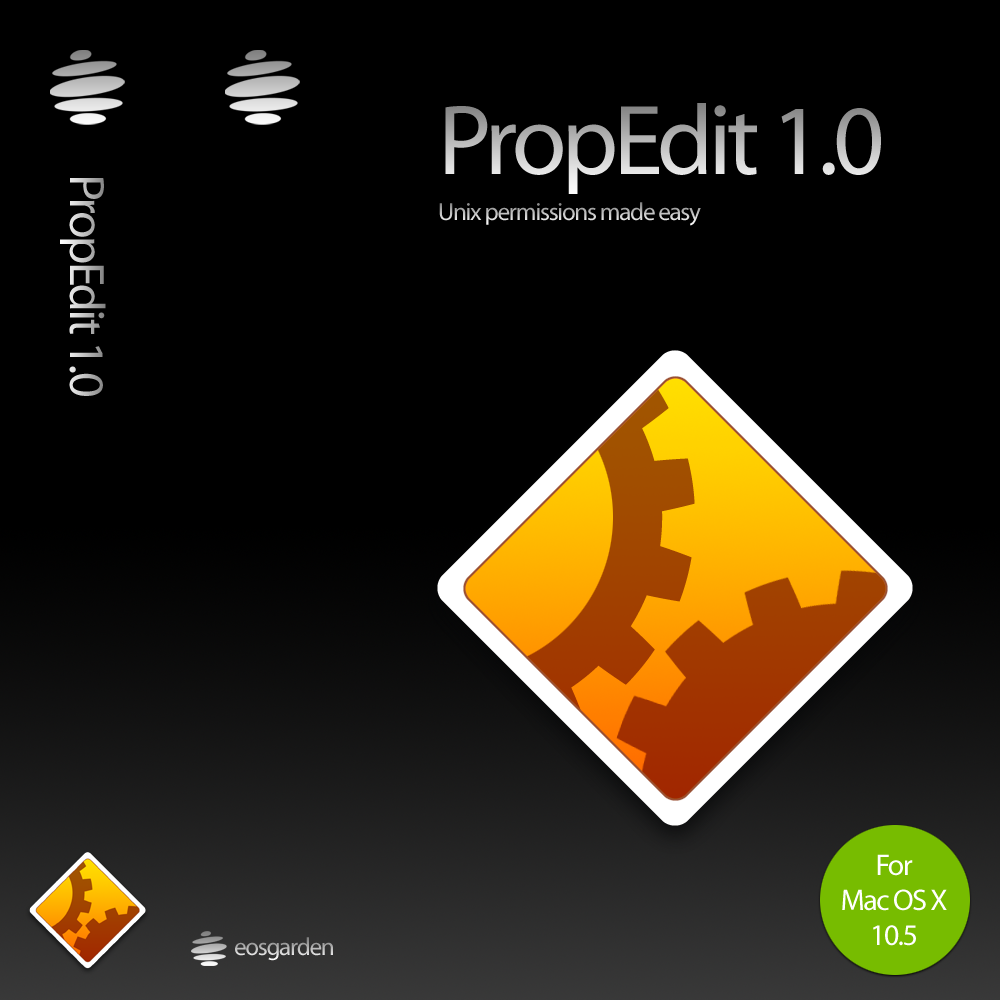
<style>
.page{position:relative;width:1000px;height:1000px;background:#000000}
.page>*{position:absolute;margin:0}
.t1{font:100px "Myriad-Roman";letter-spacing:-0.05em}
.t2{font:50px "Myriad-Roman";letter-spacing:-0.05em}
.t3{font:25px "Myriad-Roman";letter-spacing:-0.05em}
.t4{font:30px/35px "Myriad-Roman";letter-spacing:-0.05em;color:#ffffff}
</style>
<div class="page">
<p class="t1" style="left:445px;top:103px;width:436px;height:91px">PropEdit 1.0</p>
<p class="t2" style="left:60px;top:178px;width:46px;height:218px;rotate:90deg">PropEdit 1.0</p>
<p class="t3" style="left:439px;top:202px;width:262px;height:24px">Unix permissions made easy</p>
<p class="t4" style="left:842px;top:854px;width:105px;height:92px;text-align:center">For<br>Mac OS X<br>10.5</p>
</div>
